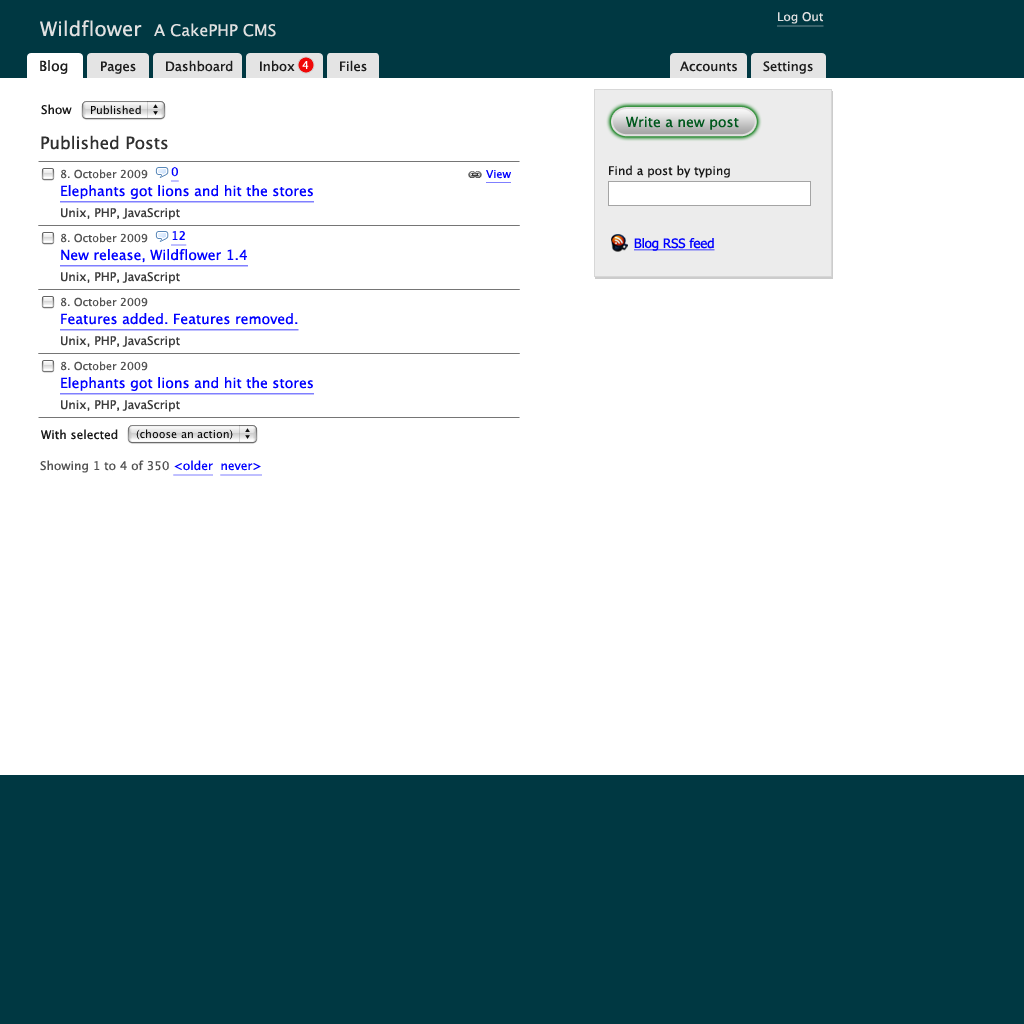
<style>
.page{position:relative;width:1024px;height:1024px;background:#ffffff}
.page>*{position:absolute;margin:0}
.t1{font:12px "LucidaGrande";color:#e0e0e0;text-decoration:underline}
.t2{font:16px "LucidaGrande";color:#e0e0e0}
.t3{font:20px "LucidaGrande";color:#e0e0e0}
.t4{font:14px "LucidaGrande";color:#1d1d1d}
.t5{font:13px "LucidaGrande";color:#1d1d1d}
.t6{font:11px "LucidaGrande";color:#ffffff}
.t7{font:12px "LucidaGrande";color:#191919}
.t8{font:14px "LucidaGrande";color:#01591e}
.t9{font:17px "LucidaGrande";color:#2f2f2f}
.t10{font:11px "LucidaGrande";color:#535353}
.t11{font:12px "LucidaGrande";color:#0000ff;text-decoration:underline}
.t12{font:11px "LucidaGrande";color:#0000ff;text-decoration:underline}
.t13{font:14px "LucidaGrande";color:#0000ff;text-decoration:underline}
.t14{font:12px "LucidaGrande";color:#3b3b3b}
.t15{font:13px "Tahoma";color:#0000ff;text-decoration:underline}
.t16{font:12px "LucidaGrande";color:#535353}
</style>
<div class="page">
<p class="t1" style="left:777px;top:12px;width:47px;height:15px">Log Out</p>
<p class="t2" style="left:40px;top:20px;width:236px;height:17px"><span class="t3">Wildflower  </span>A CakePHP CMS</p>
<p class="t4" style="left:40px;top:60px;width:28px;height:14px">Blog</p>
<p class="t5" style="left:101px;top:61px;width:35px;height:13px">Pages</p>
<p class="t5" style="left:166px;top:60px;width:67px;height:12px">Dashboard</p>
<p class="t5" style="left:260px;top:60px;width:35px;height:12px">Inbox</p>
<p class="t6" style="left:302px;top:61px;width:7px;height:8px">4</p>
<p class="t5" style="left:340px;top:60px;width:27px;height:12px">Files</p>
<p class="t5" style="left:680px;top:61px;width:57px;height:11px">Accounts</p>
<p class="t5" style="left:763px;top:61px;width:50px;height:13px">Settings</p>
<p class="t7" style="left:41px;top:104px;width:31px;height:11px">Show</p>
<p class="t8" style="left:626px;top:116px;width:113px;height:14px">Write a new post</p>
<p class="t9" style="left:41px;top:135px;width:127px;height:15px">Published Posts</p>
<p class="t10" style="left:60px;top:169px;width:88px;height:10px">8. October 2009</p>
<p class="t11" style="left:171px;top:167px;width:8px;height:15px">0</p>
<p class="t12" style="left:486px;top:170px;width:25px;height:13px">View</p>
<p class="t7" style="left:609px;top:165px;width:121px;height:13px">Find a post by typing</p>
<p class="t13" style="left:60px;top:185px;width:254px;height:18px">Elephants got lions and hit the stores</p>
<p class="t14" style="left:61px;top:208px;width:119px;height:12px">Unix, PHP, JavaScript</p>
<p class="t10" style="left:60px;top:233px;width:88px;height:10px">8. October 2009</p>
<p class="t11" style="left:171px;top:231px;width:16px;height:15px">12</p>
<p class="t15" style="left:634px;top:238px;width:81px;height:13px">Blog RSS feed</p>
<p class="t13" style="left:60px;top:249px;width:188px;height:18px">New release, Wildflower 1.4</p>
<p class="t14" style="left:61px;top:272px;width:119px;height:12px">Unix, PHP, JavaScript</p>
<p class="t10" style="left:60px;top:297px;width:88px;height:10px">8. October 2009</p>
<p class="t13" style="left:60px;top:313px;width:239px;height:18px">Features added. Features removed.</p>
<p class="t14" style="left:61px;top:336px;width:119px;height:12px">Unix, PHP, JavaScript</p>
<p class="t10" style="left:60px;top:361px;width:88px;height:10px">8. October 2009</p>
<p class="t13" style="left:60px;top:377px;width:254px;height:18px">Elephants got lions and hit the stores</p>
<p class="t14" style="left:61px;top:400px;width:119px;height:12px">Unix, PHP, JavaScript</p>
<p class="t7" style="left:41px;top:429px;width:77px;height:11px">With selected</p>
<p class="t16" style="left:40px;top:460px;width:222px;height:16px">Showing 1 to 4 of 350 <span class="t11">&lt;older  never&gt;</span></p>
</div>
